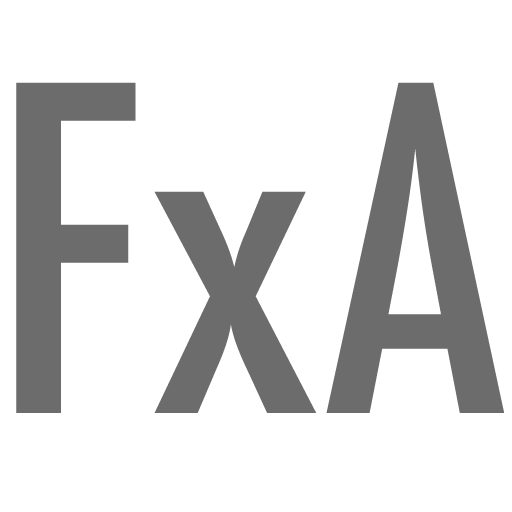
<style>
.page{position:relative;width:512px;height:512px;background:#ffffff}
.page>*{position:absolute;margin:0}
.t1{font:437.6px "Futura-CondensedMedium";letter-spacing:0.02em;color:#6c6c6c}
</style>
<div class="page">
<p class="t1" style="left:16px;top:82px;width:489px;height:331px">FxA</p>
</div>
